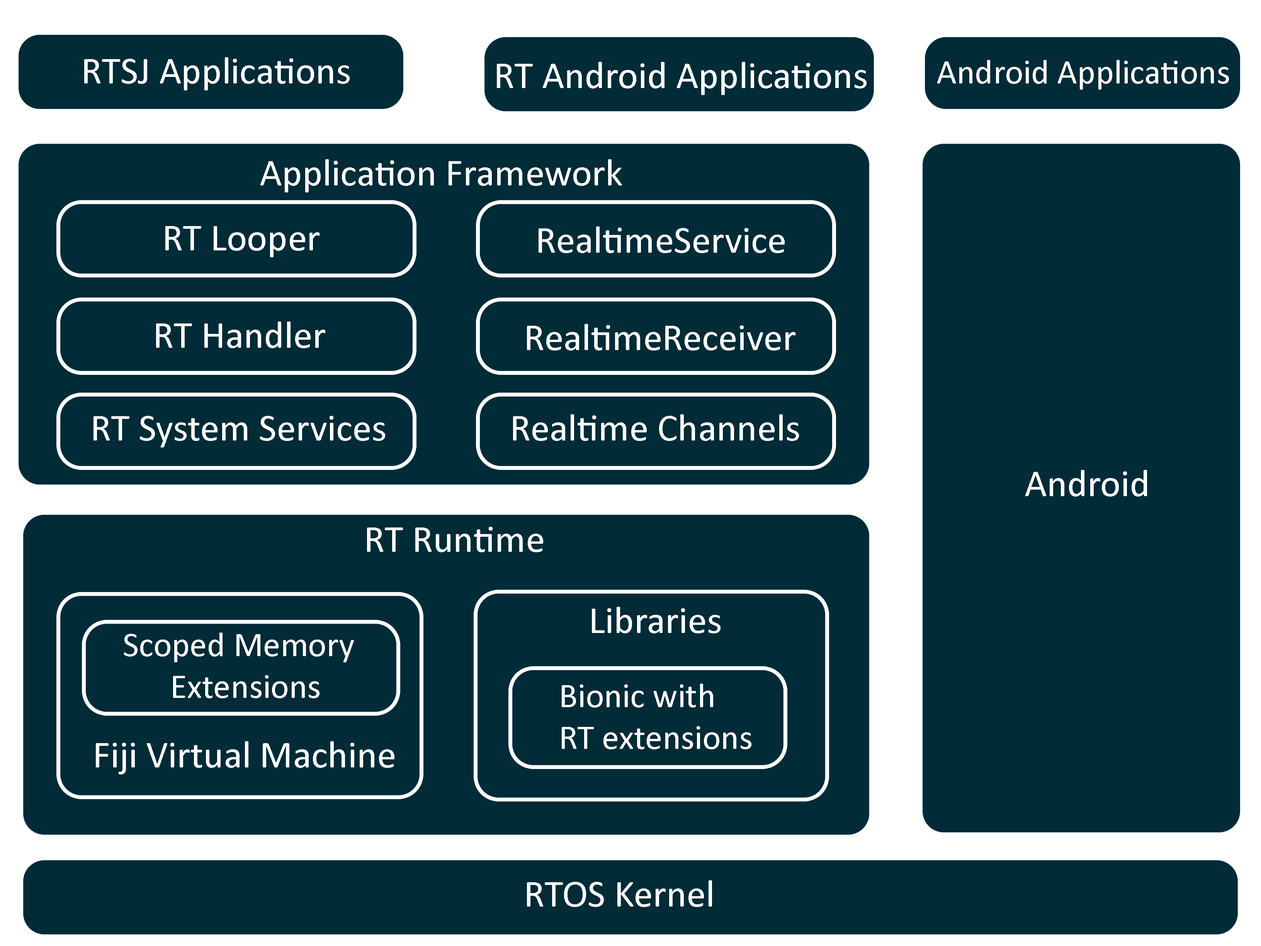
<style>
.page{position:relative;width:1261px;height:946px;background:#002b37}
.page>*{position:absolute;margin:0}
.t1{font:38.6px "Calibri";color:#ffffff}
.t2{font:34.8px "Calibri";color:#ffffff}
</style>
<div class="page">
<p class="t1" style="left:84px;top:57px;width:266px;height:33px">RTSJ Applications</p>
<p class="t1" style="left:497px;top:62px;width:369px;height:33px">RT Android Applications</p>
<p class="t2" style="left:937px;top:60px;width:292px;height:30px">Android Applications</p>
<p class="t1" style="left:260px;top:159px;width:362px;height:33px">Application Framework</p>
<p class="t1" style="left:165px;top:226px;width:154px;height:31px">RT Looper</p>
<p class="t1" style="left:539px;top:226px;width:246px;height:27px">RealtimeService</p>
<p class="t1" style="left:156px;top:321px;width:169px;height:27px">RT Handler</p>
<p class="t1" style="left:527px;top:324px;width:268px;height:26px">RealtimeReceiver</p>
<p class="t1" style="left:93px;top:416px;width:292px;height:31px">RT System Services</p>
<p class="t1" style="left:513px;top:414px;width:286px;height:27px">Realtime Channels</p>
<p class="t1" style="left:1025px;top:470px;width:122px;height:26px">Android</p>
<p class="t1" style="left:367px;top:527px;width:176px;height:25px">RT Runtime</p>
<p class="t1" style="left:592px;top:607px;width:128px;height:26px">Libraries</p>
<p class="t2" style="left:124px;top:632px;width:230px;height:66px">Scoped Memory<br>      Extensions</p>
<p class="t2" style="left:562px;top:683px;width:189px;height:66px">Bionic with<br>RT extensions</p>
<p class="t1" style="left:96px;top:741px;width:298px;height:33px">Fiji Virtual Machine</p>
<p class="t1" style="left:527px;top:880px;width:185px;height:27px">RTOS Kernel</p>
</div>
